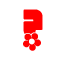
<style>
.page{position:relative;width:64px;height:64px;background:#ffffff}
.page>*{position:absolute;margin:0}
.t1{font:60px "Chick";color:#ff0000}
</style>
<div class="page">
<p class="t1" style="left:23px;top:9px;width:20px;height:42px">?</p>
</div>
